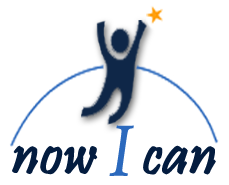
<style>
.page{position:relative;width:229px;height:185px;background:#ffffff}
.page>*{position:absolute;margin:0}
.t1{font:80.8px "ArnoPro-Regular";color:#2b69bd;font-style:italic;scale:0.81 1}
.t2{font:62.5px "Pristina-Regular";color:#031c3f;font-weight:bold}
.t3{font:63.4px "Pristina-Regular";color:#031c3f;font-weight:bold}
</style>
<div class="page">
<p class="t1" style="left:109px;top:125px;width:25px;height:51px">I</p>
<p class="t2" style="left:12px;top:145px;width:86px;height:30px">now</p>
<p class="t3" style="left:143px;top:145px;width:73px;height:30px">can</p>
</div>
